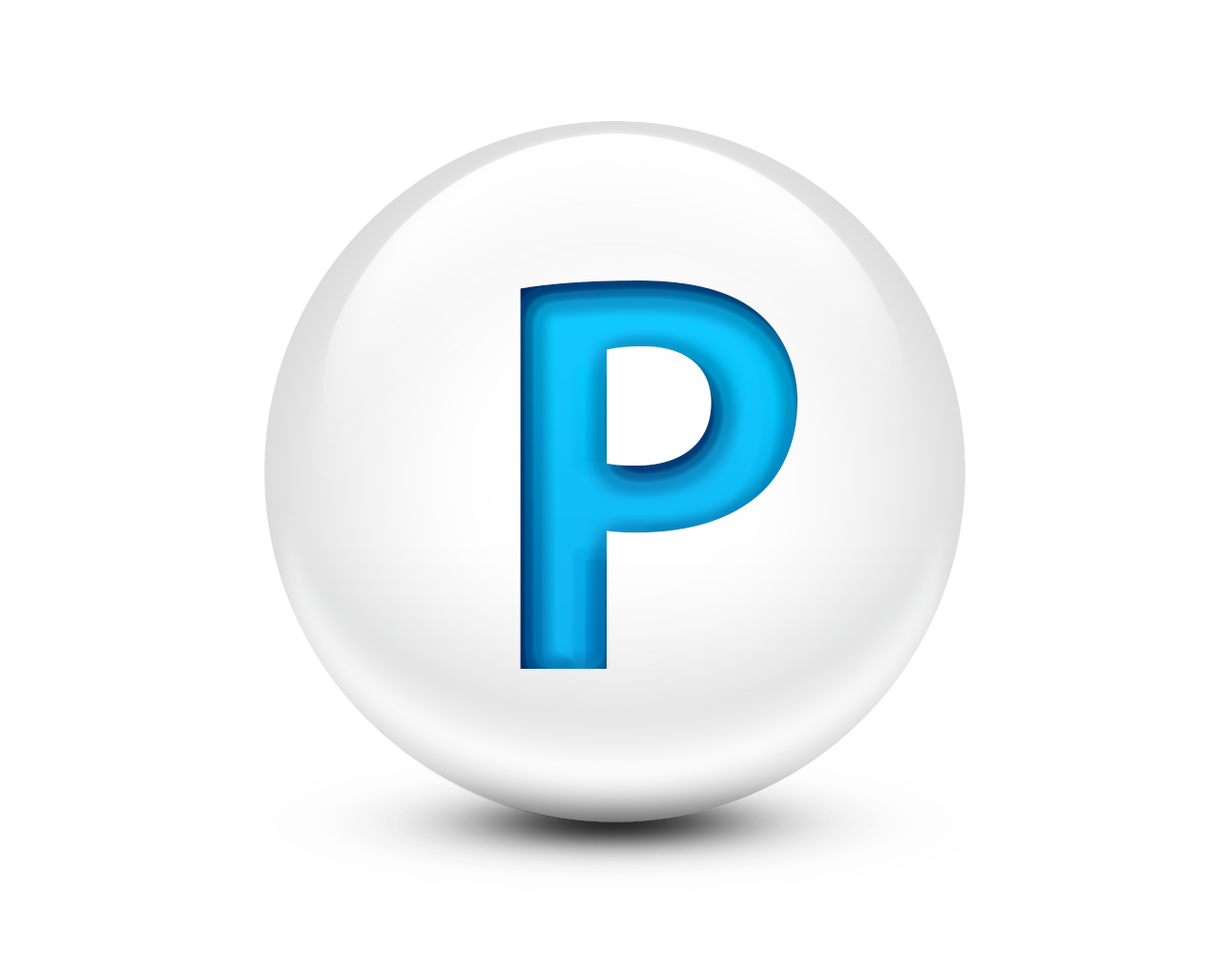
<style>
.page{position:relative;width:1221px;height:977px;background:#ffffff}
.page>*{position:absolute;margin:0}
.t1{font:572.3px "MyriadPro-Bold"}
</style>
<div class="page">
<p class="t1" style="left:520px;top:280px;width:277px;height:389px">P</p>
</div>
